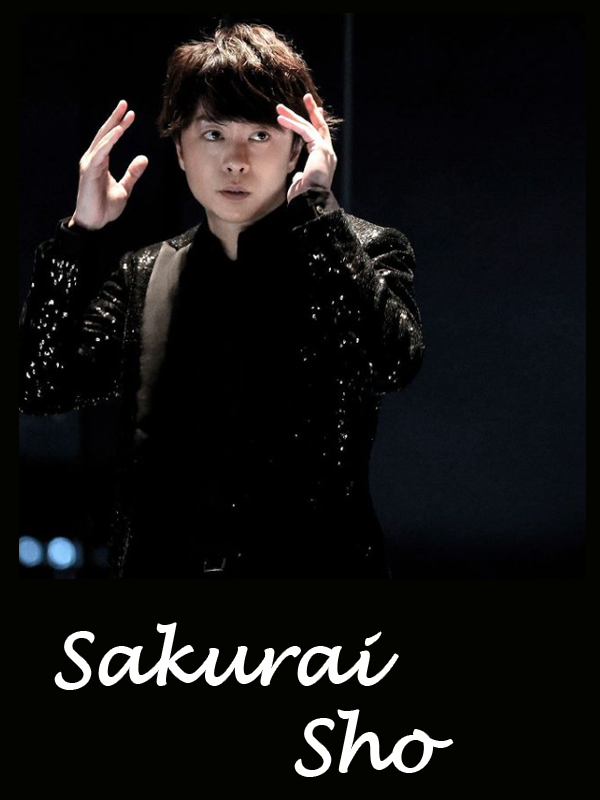
<style>
.page{position:relative;width:600px;height:800px;background:#030300}
.page>*{position:absolute;margin:0}
.t1{font:72px "LucidaHandwriting-Italic";color:#ffffff}
</style>
<div class="page">
<p class="t1" style="left:55px;top:623px;width:343px;height:66px">Sakurai</p>
<p class="t1" style="left:295px;top:710px;width:158px;height:66px">Sho</p>
</div>
